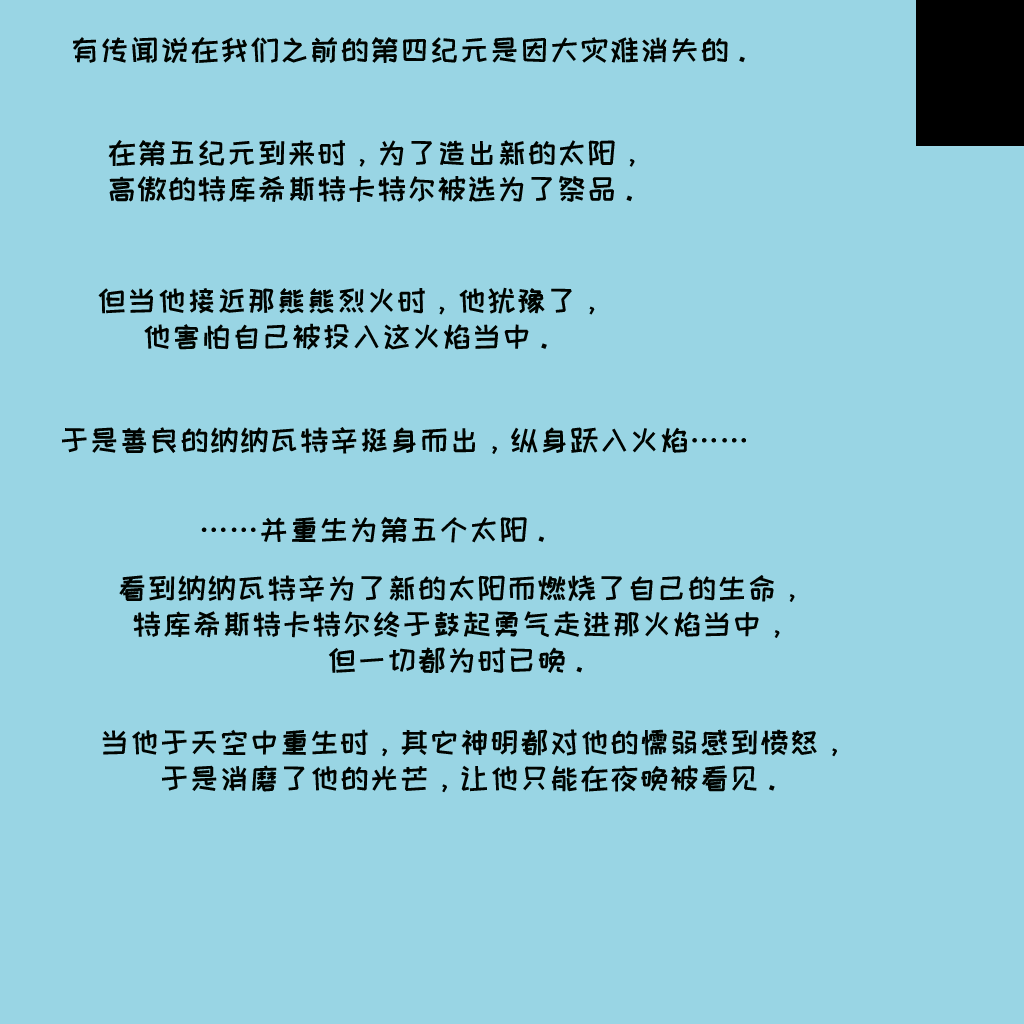
<style>
.page{position:relative;width:1024px;height:1024px;background:#99d5e4}
.page>*{position:absolute;margin:0}
.t1{font:30px "HappyZcool-2016";color:#000400}
.t2{font:30px/36px "HappyZcool-2016";color:#000400}
</style>
<div class="page">
<p class="t1" style="left:73px;top:37px;width:672px;height:26px">有传闻说在我们之前的第四纪元是因大灾难消失的。</p>
<p class="t2" style="left:108px;top:140px;width:527px;height:62px;text-align:center">在第五纪元到来时，为了造出新的太阳，<br>高傲的特库希斯特卡特尔被选为了祭品。</p>
<p class="t2" style="left:98px;top:287px;width:497px;height:63px;text-align:center">但当他接近那熊熊烈火时，他犹豫了，<br>他害怕自己被投入这火焰当中。</p>
<p class="t1" style="left:61px;top:427px;width:685px;height:27px">于是善良的纳纳瓦特辛挺身而出，纵身跃入火焰……</p>
<p class="t1" style="left:201px;top:516px;width:343px;height:27px">……并重生为第五个太阳。</p>
<p class="t2" style="left:119px;top:575px;width:676px;height:98px;text-align:center">看到纳纳瓦特辛为了新的太阳而燃烧了自己的生命，<br>特库希斯特卡特尔终于鼓起勇气走进那火焰当中，<br>但一切都为时已晚。</p>
<p class="t2" style="left:102px;top:729px;width:735px;height:64px;text-align:center">当他于天空中重生时，其它神明都对他的懦弱感到愤怒，<br>于是消磨了他的光芒，让他只能在夜晚被看见。</p>
</div>
